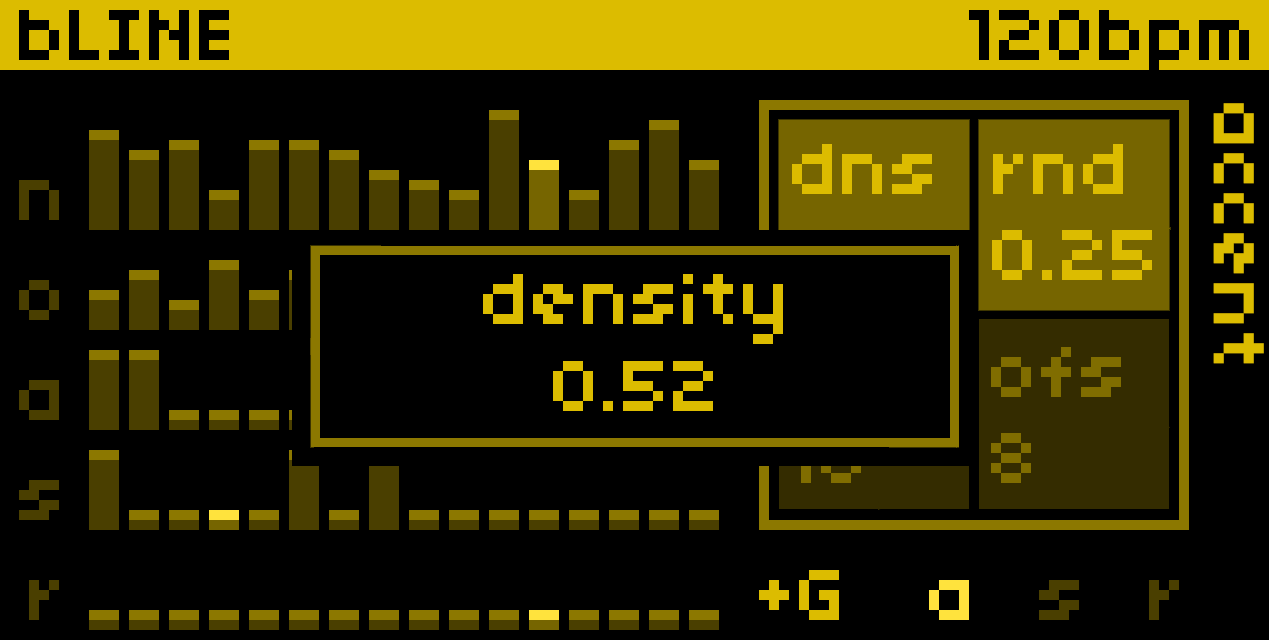
<style>
.page{position:relative;width:1269px;height:640px;background:#000000}
.page>*{position:absolute;margin:0}
.t1{font:80px "04b03";color:#dcbc00}
.t2{font:80px "04b03";color:#806d00}
</style>
<div class="page">
<p class="t1" style="left:1213px;top:103px;width:51px;height:261px;rotate:90deg">accent</p>
<p class="t1" style="left:792px;top:144px;width:140px;height:50px">dns</p>
<p class="t1" style="left:993px;top:144px;width:130px;height:50px">rnd</p>
<p class="t1" style="left:992px;top:230px;width:160px;height:50px">0.25</p>
<p class="t1" style="left:483px;top:274px;width:300px;height:70px">density</p>
<p class="t2" style="left:991px;top:347px;width:130px;height:50px">ofs</p>
<p class="t1" style="left:553px;top:361px;width:160px;height:50px">0.52</p>
<p class="t2" style="left:991px;top:433px;width:40px;height:50px">8</p>
</div>
